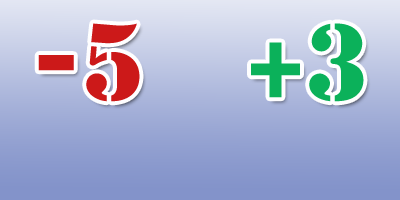
<style>
.page{position:relative;width:400px;height:200px}
.page>*{position:absolute;margin:0}
.t1{font:100px "StencilStd";color:#cc1717}
.t2{font:100px "StencilStd";color:#09b158}
</style>
<div class="page">
<p class="t1" style="left:38px;top:23px;width:326px;height:79px">-5   <span class="t2">+3</span></p>
</div>
